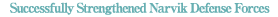
<style>
.page{position:relative;width:278px;height:17px;background:#ffffff}
.page>*{position:absolute;margin:0}
.t1{font:13px "RyuminPro-ExBold";letter-spacing:-0.08em;color:#67afb2}
</style>
<div class="page">
<p class="t1" style="left:10px;top:2px;width:260px;height:13px">Successfully Strengthened Narvik Defense Forces</p>
</div>
